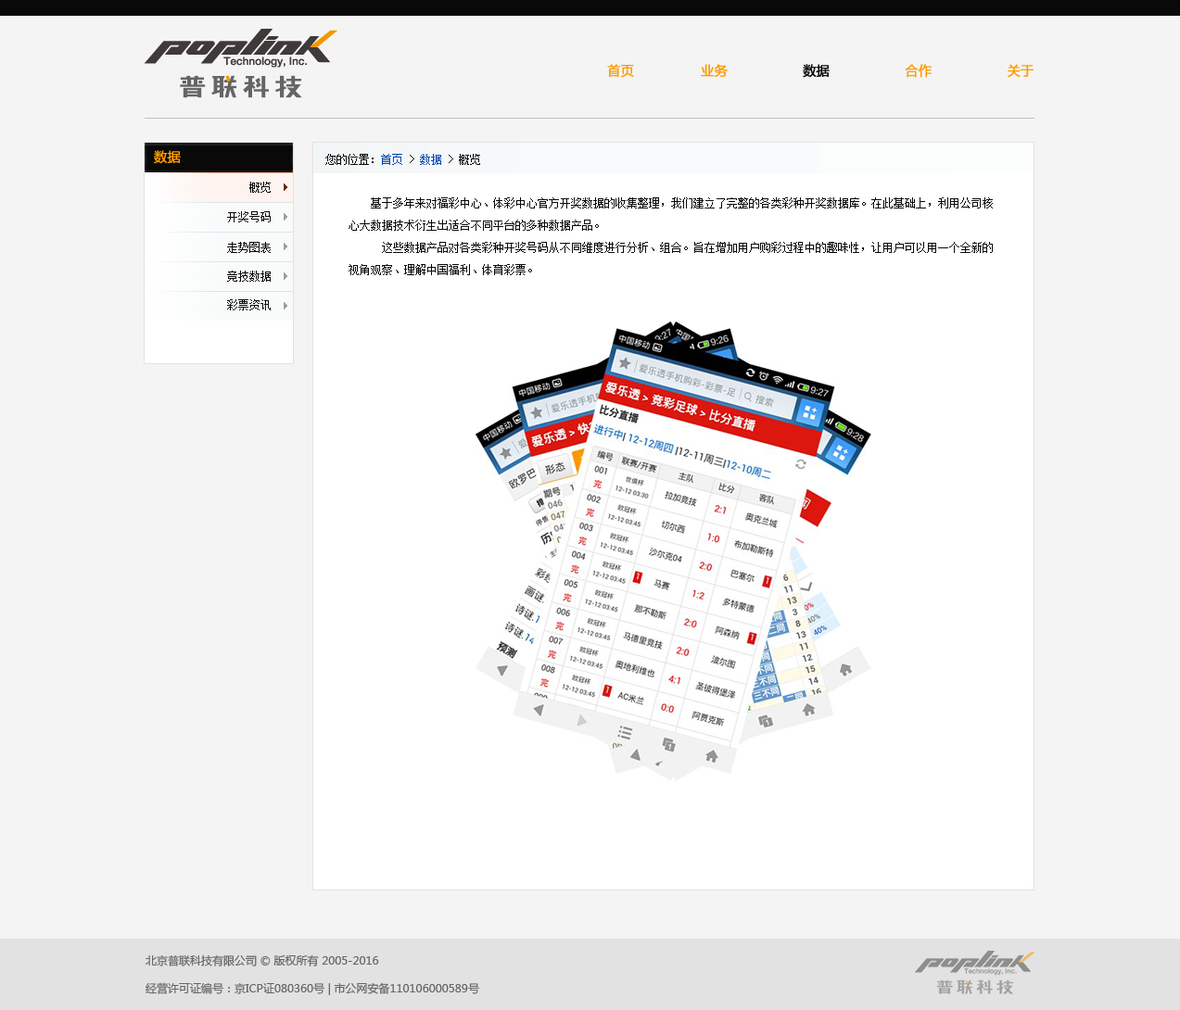
<style>
.page{position:relative;width:1180px;height:1010px;background:#f4f4f4}
.page>*{position:absolute;margin:0}
.t1{font:13px "MicrosoftYaHei";color:#fe9b00;text-transform:uppercase;font-weight:bold}
.t2{font:13px "MicrosoftYaHei";color:#090909;text-transform:uppercase;font-weight:bold}
.t3{font:13px "MicrosoftYaHei";color:#fe9b00;font-weight:bold}
.t4{font:11.1px "SimSun";color:#090909;text-transform:uppercase}
.t5{font:11.1px "SimSun";color:#0146af;text-transform:uppercase}
.t6{font:11.1px/22.2px "SimSun";color:#090909;text-transform:uppercase}
.t7{font:11.1px/27.8px "MicrosoftYaHei";color:#666666}
</style>
<div class="page">
<p class="t1" style="left:607px;top:64px;width:427px;height:14px">首页                业务                  <span class="t2">数据</span>                  合作                  关于</p>
<p class="t3" style="left:154px;top:150px;width:27px;height:14px">数据</p>
<p class="t4" style="left:325px;top:154px;width:155px;height:11px">您的位置：<span class="t5">首页 </span>&gt; <span class="t5">数据</span> &gt; 概览</p>
<p class="t4" style="left:249px;top:182px;width:22px;height:11px">概览</p>
<p class="t6" style="left:349px;top:197px;width:644px;height:78px">基于多年来对福彩中心、体彩中心官方开奖数据的收集整理，我们建立了完整的各类彩种开奖数据库。在此基础上，利用公司核<br>心大数据技术衍生出适合不同平台的多种数据产品。<br>      这些数据产品对各类彩种开奖号码从不同维度进行分析、组合。旨在增加用户购彩过程中的趣味性，让用户可以用一个全新的<br>视角观察、理解中国福利、体育彩票。</p>
<p class="t4" style="left:227px;top:211px;width:44px;height:11px">开奖号码</p>
<p class="t4" style="left:227px;top:242px;width:44px;height:11px">走势图表</p>
<p class="t4" style="left:227px;top:271px;width:44px;height:11px">竞技数据</p>
<p class="t4" style="left:227px;top:299px;width:44px;height:12px">彩票资讯</p>
<p class="t7" style="left:146px;top:955px;width:334px;height:41px">北京普联科技有限公司 © 版权所有 2005-2016<br>经营许可证编号：京ICP证080360号 | 市公网安备110106000589号</p>
</div>
